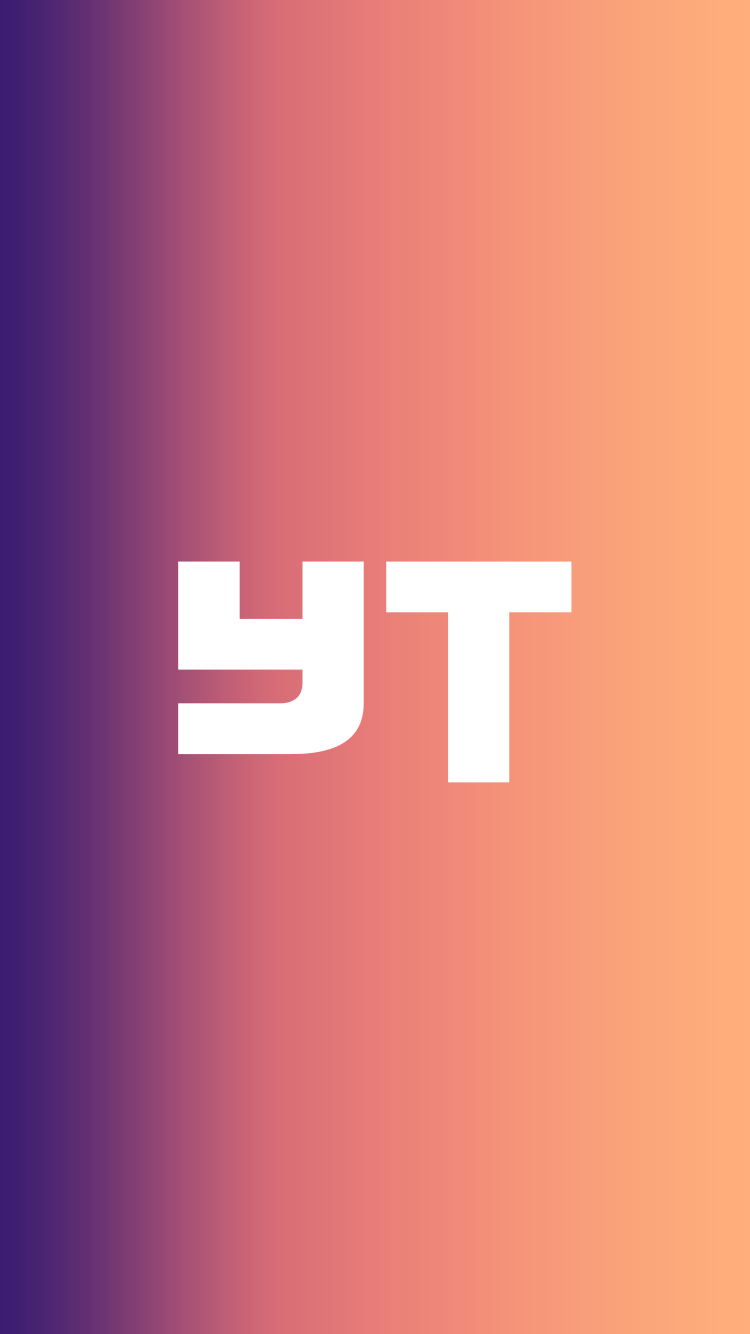
<style>
.page{position:relative;width:750px;height:1334px}
.page>*{position:absolute;margin:0}
.t1{font:269.3px "Moltors";color:#ffffff}
</style>
<div class="page">
<p class="t1" style="left:178px;top:561px;width:394px;height:222px">yt</p>
</div>
